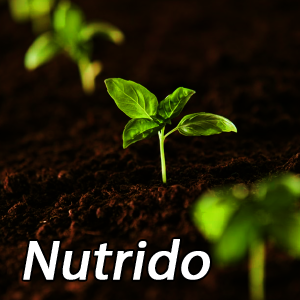
<style>
.page{position:relative;width:300px;height:300px}
.page>*{position:absolute;margin:0}
.t1{font:55.6px "MyriadPro-Regular";color:#ffffff;font-weight:bold;font-style:italic}
</style>
<div class="page">
<p class="t1" style="left:23px;top:239px;width:187px;height:41px">Nutrido</p>
</div>
